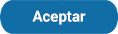
<style>
.page{position:relative;width:118px;height:34px;background:#106da6}
.page>*{position:absolute;margin:0}
.t1{font:15px "Roboto-Bold";color:#ffffff}
</style>
<div class="page">
<p class="t1" style="left:32px;top:10px;width:54px;height:15px">Aceptar</p>
</div>
